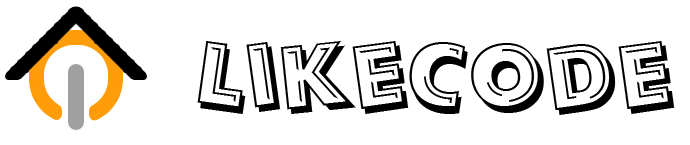
<style>
.page{position:relative;width:690px;height:145px;background:#ffffff}
.page>*{position:absolute;margin:0}
.t1{font:90.2px "AlphabetSoupBT-Tilt";color:#000000}
</style>
<div class="page">
<p class="t1" style="left:197px;top:41px;width:478px;height:74px">LikeCode</p>
</div>
